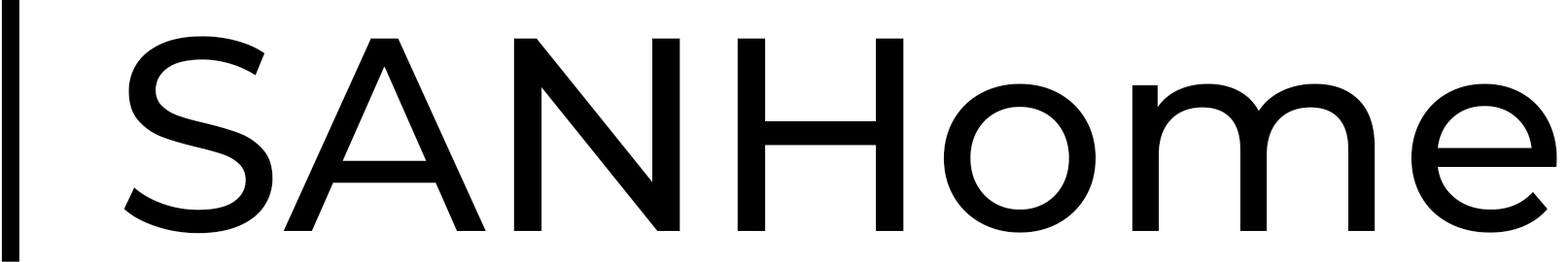
<style>
.page{position:relative;width:1568px;height:262px;background:#ffffff}
.page>*{position:absolute;margin:0}
.t1{font:210.2px "Montserrat-Medium";color:#000000;scale:4.64 1}
.t2{font:275.5px "Montserrat-Medium";color:#000000}
</style>
<div class="page">
<p class="t1" style="left:1px;top:0px;width:18px;height:262px;rotate:-90deg">-</p>
<p class="t2" style="left:123px;top:36px;width:1434px;height:198px">SANHome</p>
</div>
